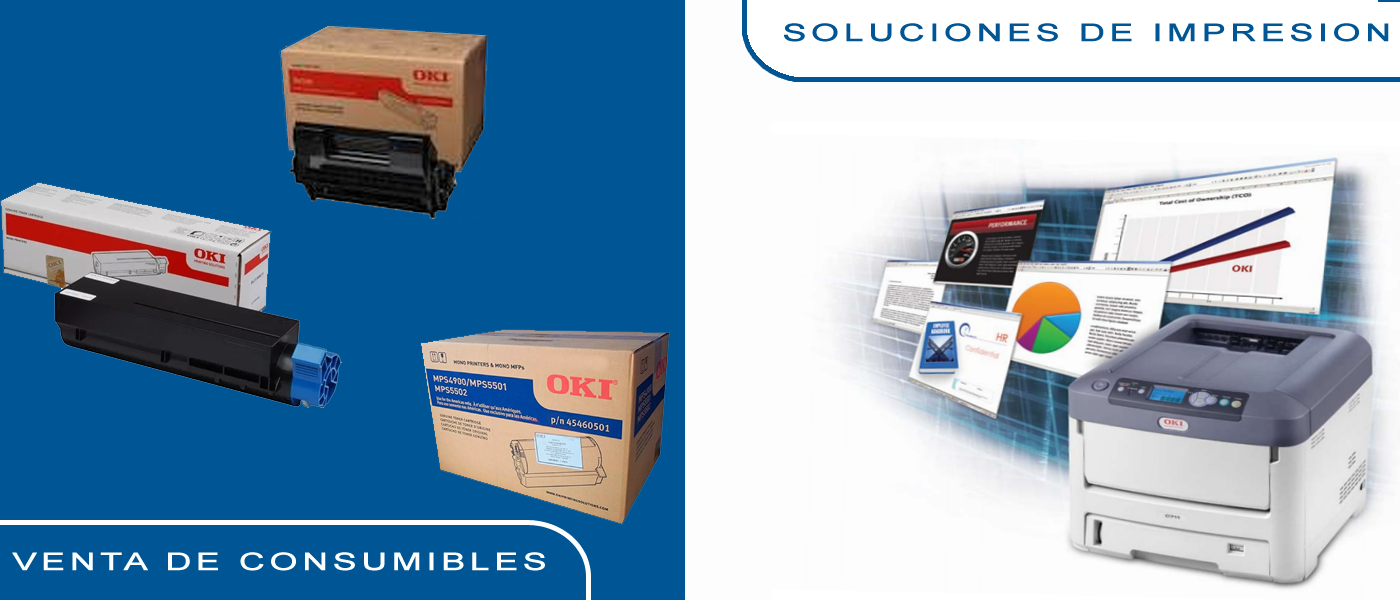
<style>
.page{position:relative;width:1400px;height:600px;background:#005595}
.page>*{position:absolute;margin:0}
.t1{font:24px "ArialMT";letter-spacing:0.1em;color:#005595;font-weight:bold;scale:1.5 1}
.t2{font:24px "ArialMT";letter-spacing:0.1em;color:#ffffff;font-weight:bold;scale:1.5 1}
</style>
<div class="page">
<p class="t1" style="left:784px;top:23px;width:605px;height:19px">SOLUCIONES DE IMPRESION</p>
<p class="t2" style="left:12px;top:552px;width:533px;height:19px">VENTA DE CONSUMIBLES</p>
</div>
